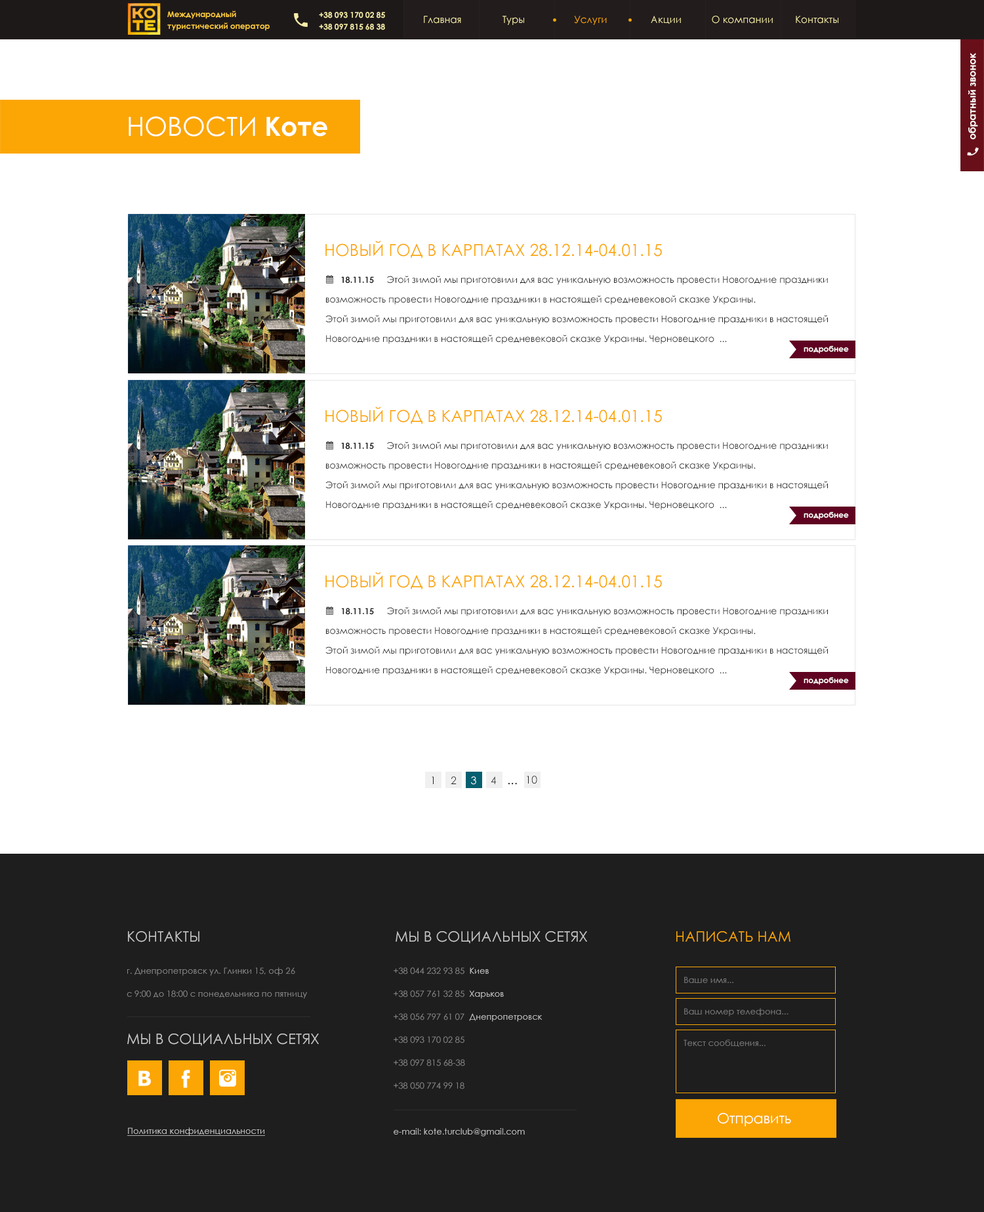
<style>
.page{position:relative;width:984px;height:1212px;background:#ffffff}
.page>*{position:absolute;margin:0}
.t1{font:7.9px/11.8px "CenturyGothic-Bold";color:#fac93e}
.t2{font:7.9px/11.8px "CenturyGothic-Bold";color:#f6eea9}
.t3{font:9.8px "CenturyGothic";color:#f6eea9}
.t4{font:9.8px "CenturyGothic";color:#fba605}
.t5{font:9.8px "CenturyGothic-Bold";color:#ffffff}
.t6{font:26.2px "CenturyGothic";color:#ffffff;text-transform:uppercase}
.t7{font:26.2px "CenturyGothic-Bold";color:#ffffff}
.t8{font:16.4px "CenturyGothic";color:#fba605;text-transform:uppercase}
.t9{font:9.2px/19.7px "CenturyGothic";color:#242424}
.t10{font:8.5px/19.7px "CenturyGothic-Bold";color:#242424}
.t11{font:7.9px "CenturyGothic-Bold";color:#ffffff}
.t12{font:10.5px "CenturyGothic";letter-spacing:0.02em;color:#242424}
.t13{font:11.8px "CenturyGothic";letter-spacing:0.02em;color:#242424}
.t14{font:14.4px "CenturyGothic";color:#c9c9c9;text-transform:uppercase}
.t15{font:14.4px "CenturyGothic";color:#fba605;text-transform:uppercase}
.t16{font:8.5px/23px "CenturyGothic";color:#888888}
.t17{font:8.5px/23px "CenturyGothic";color:#c9c9c9}
.t18{font:8.5px/10.5px "CenturyGothic";color:#7d7d7d}
.t19{font:14.4px "CenturyGothic";color:#ffffff}
.t20{font:8.5px "CenturyGothic";color:#c9c9c9;text-decoration:underline}
</style>
<div class="page">
<p class="t1" style="left:167px;top:10px;width:103px;height:21px">Международный <br>туристический оператор</p>
<p class="t2" style="left:319px;top:12px;width:66px;height:18px">+38 093 170 02 85<br>+38 097 815 68 38</p>
<p class="t3" style="left:424px;top:16px;width:414px;height:9px">Главная               Туры                  <span class="t4">Услуги</span>                Акции           О компании        Контакты</p>
<p class="t5" style="left:968px;top:52px;width:10px;height:88px;rotate:-90deg">обратный звонок</p>
<p class="t6" style="left:129px;top:116px;width:198px;height:20px">новости<span class="t7"> Коте</span></p>
<p class="t8" style="left:325px;top:241px;width:337px;height:17px">Новый Год в Карпатах 28.12.14-04.01.15</p>
<p class="t9" style="left:325px;top:276px;width:503px;height:68px"><span class="t10">18.11.15</span>     Этой зимой мы приготовили для вас уникальную возможность провести Новогодние праздники <br>возможность провести Новогодние праздники в настоящей средневековой сказке Украины. <br>Этой зимой мы приготовили для вас уникальную возможность провести Новогодние праздники в настоящей<br>Новогодние праздники в настоящей средневековой сказке Украины. Черновецкого  ...</p>
<p class="t11" style="left:804px;top:346px;width:45px;height:8px">подробнее</p>
<p class="t8" style="left:325px;top:407px;width:337px;height:17px">Новый Год в Карпатах 28.12.14-04.01.15</p>
<p class="t9" style="left:325px;top:442px;width:503px;height:68px"><span class="t10">18.11.15</span>     Этой зимой мы приготовили для вас уникальную возможность провести Новогодние праздники <br>возможность провести Новогодние праздники в настоящей средневековой сказке Украины. <br>Этой зимой мы приготовили для вас уникальную возможность провести Новогодние праздники в настоящей<br>Новогодние праздники в настоящей средневековой сказке Украины. Черновецкого  ...</p>
<p class="t11" style="left:804px;top:512px;width:45px;height:8px">подробнее</p>
<p class="t8" style="left:325px;top:572px;width:337px;height:17px">Новый Год в Карпатах 28.12.14-04.01.15</p>
<p class="t9" style="left:325px;top:607px;width:503px;height:68px"><span class="t10">18.11.15</span>     Этой зимой мы приготовили для вас уникальную возможность провести Новогодние праздники <br>возможность провести Новогодние праздники в настоящей средневековой сказке Украины. <br>Этой зимой мы приготовили для вас уникальную возможность провести Новогодние праздники в настоящей<br>Новогодние праздники в настоящей средневековой сказке Украины. Черновецкого  ...</p>
<p class="t11" style="left:804px;top:677px;width:45px;height:8px">подробнее</p>
<p class="t12" style="left:432px;top:776px;width:2px;height:8px">1</p>
<p class="t13" style="left:491px;top:776px;width:26px;height:9px"><span class="t12">4</span>   ...</p>
<p class="t12" style="left:527px;top:775px;width:10px;height:9px">10</p>
<p class="t14" style="left:128px;top:931px;width:71px;height:11px">контакты</p>
<p class="t14" style="left:128px;top:931px;width:71px;height:11px">контакты</p>
<p class="t14" style="left:396px;top:931px;width:191px;height:12px">Мы в социальных сетях</p>
<p class="t14" style="left:396px;top:931px;width:191px;height:12px">Мы в социальных сетях</p>
<p class="t15" style="left:676px;top:931px;width:115px;height:11px">Написать нам</p>
<p class="t15" style="left:676px;top:931px;width:115px;height:11px">Написать нам</p>
<p class="t16" style="left:127px;top:967px;width:180px;height:32px">г. Днепропетровск ул. Глинки 15, оф 26<br>с 9:00 до 18:00 с понедельника по пятницу</p>
<p class="t16" style="left:127px;top:967px;width:180px;height:32px">г. Днепропетровск ул. Глинки 15, оф 26<br>с 9:00 до 18:00 с понедельника по пятницу</p>
<p class="t16" style="left:394px;top:967px;width:149px;height:169px">+38 044 232 93 85  <span class="t17">Киев<br></span>+38 057 761 32 85  <span class="t17">Харьков<br></span>+38 056 797 61 07  <span class="t17">Днепропетровск<br></span>+38 093 170 02 85<br>+38 097 815 68-38<br>+38 050 774 99 18<br><br><span class="t17">e-mail: kote.turclub@gmail.com</span></p>
<p class="t16" style="left:394px;top:967px;width:149px;height:169px">+38 044 232 93 85  <span class="t17">Киев<br></span>+38 057 761 32 85  <span class="t17">Харьков<br></span>+38 056 797 61 07  <span class="t17">Днепропетровск<br></span>+38 093 170 02 85<br>+38 097 815 68-38<br>+38 050 774 99 18<br><br><span class="t17">e-mail: kote.turclub@gmail.com</span></p>
<p class="t18" style="left:684px;top:976px;width:105px;height:70px">Ваше имя...<br><br><br>Ваш номер телефона...<br><br><br>Текст сообщения...</p>
<p class="t18" style="left:684px;top:976px;width:105px;height:70px">Ваше имя...<br><br><br>Ваш номер телефона...<br><br><br>Текст сообщения...</p>
<p class="t14" style="left:127px;top:1033px;width:192px;height:13px">Мы в социальных сетях</p>
<p class="t14" style="left:127px;top:1033px;width:192px;height:13px">Мы в социальных сетях</p>
<p class="t19" style="left:718px;top:1113px;width:73px;height:13px">Отправить</p>
<p class="t19" style="left:718px;top:1113px;width:73px;height:13px">Отправить</p>
<p class="t20" style="left:127px;top:1127px;width:138px;height:9px">Политика конфиденциальности</p>
<p class="t20" style="left:127px;top:1127px;width:138px;height:9px">Политика конфиденциальности</p>
</div>
